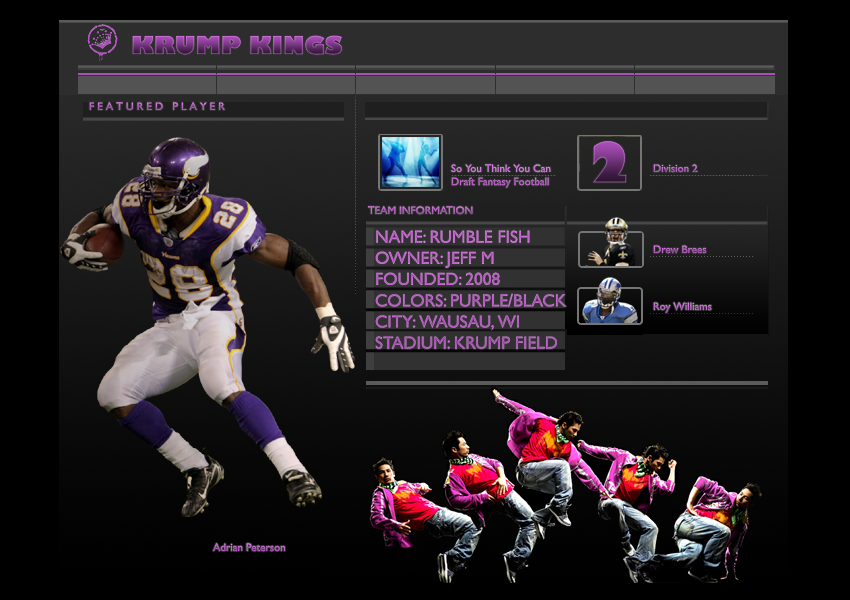
<style>
.page{position:relative;width:850px;height:600px;background:#000000}
.page>*{position:absolute;margin:0}
.t1{font:24px "GillSans-UltraBold"}
.t2{font:11px "GillSansMT";color:#aa4eb9}
.t3{font:54px "GillSans-UltraBold"}
.t4{font:11px "GillSansMT";color:#cb70d6}
.t5{font:11px "GillSansMT"}
.t6{font:17.6px "GillSansMT";color:#aa4eb9}
.t7{font:18px "GillSansMT";color:#aa4eb9}
.t8{font:11px "GillSansMT";color:#c369cd}
</style>
<div class="page">
<p class="t1" style="left:132px;top:35px;width:210px;height:20px">KRUMP KINGS</p>
<p class="t2" style="left:89px;top:102px;width:136px;height:9px">F E A T U R E D   P L A Y E R</p>
<p class="t3" style="left:593px;top:141px;width:33px;height:42px">2</p>
<p class="t4" style="left:451px;top:164px;width:100px;height:24px">So You Think You Can <br>Draft Fantasy Football</p>
<p class="t5" style="left:653px;top:164px;width:45px;height:9px">Division 2</p>
<p class="t2" style="left:368px;top:206px;width:105px;height:9px">TEAM INFORMATION</p>
<p class="t6" style="left:375px;top:230px;width:192px;height:119px">NAME: RUMBLE FISH<br>OWNER: JEFF M<br>FOUNDED: 2008<br>COLORS: PURPLE<span class="t7">/</span>BLACK<br>CITY: WAUSAU, WI<br>STADIUM: KRUMP FIELD</p>
<p class="t2" style="left:653px;top:245px;width:54px;height:9px">Drew Brees</p>
<p class="t8" style="left:653px;top:302px;width:59px;height:11px">Roy Williams</p>
<p class="t2" style="left:213px;top:543px;width:72px;height:9px">Adrian Peterson</p>
</div>
